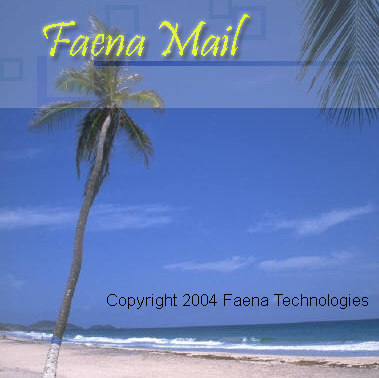
<style>
.page{position:relative;width:379px;height:378px}
.page>*{position:absolute;margin:0}
.t1{font:50px "Pristina-Regular";color:#e2f63c}
.t2{font:16.7px "ArialMT";color:#040404}
</style>
<div class="page">
<p class="t1" style="left:43px;top:14px;width:207px;height:42px">Faena Mail</p>
<p class="t2" style="left:107px;top:294px;width:261px;height:15px">Copyright 2004 Faena Technologies</p>
</div>
